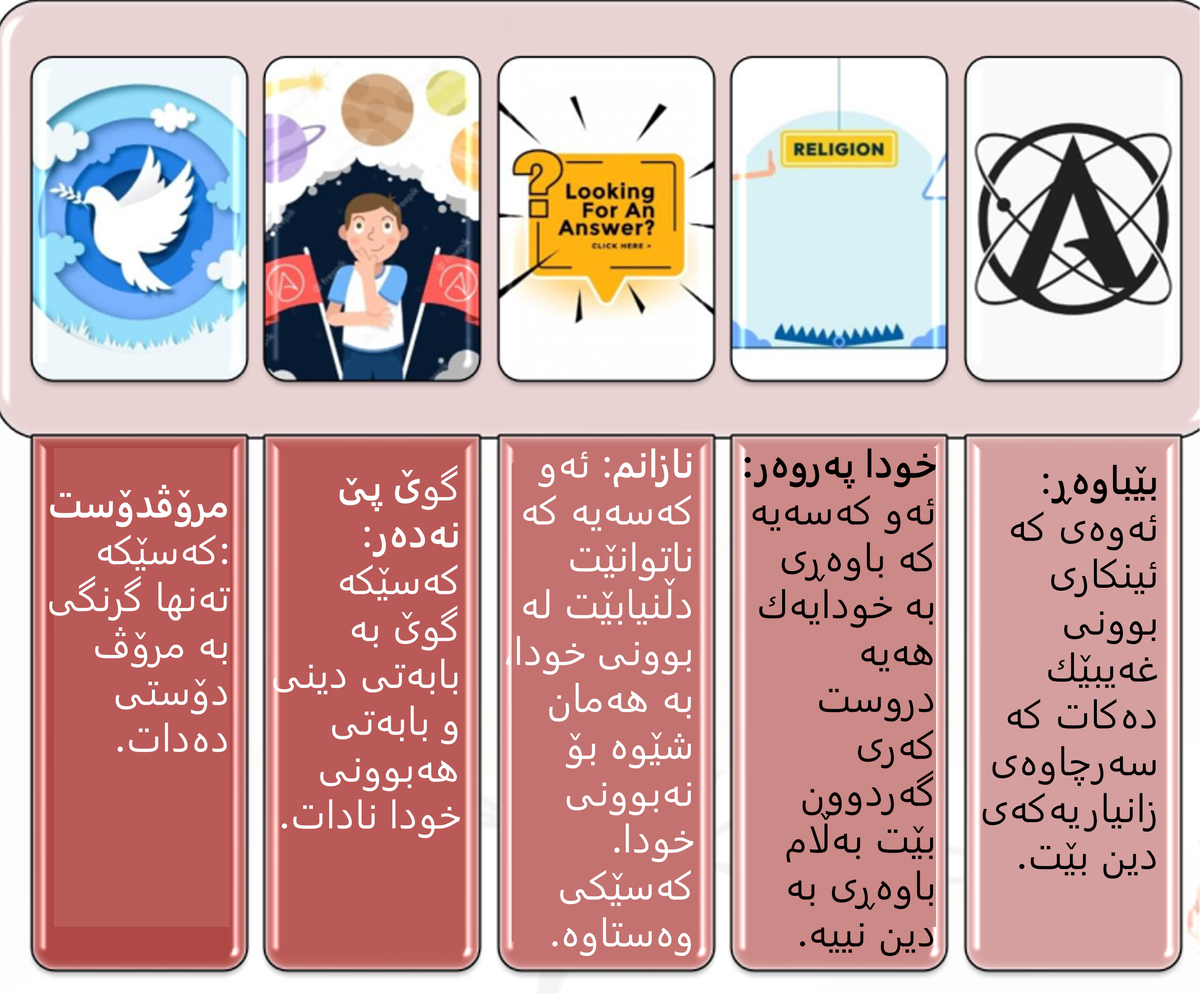
<style>
.page{position:relative;width:1200px;height:994px}
.page>*{position:absolute;margin:0}
.t1{font:39.1px "Inter-Regular";color:#ffffff}
.t2{font:39.1px "Inter-SemiBold";color:#ffffff}
.t3{font:39.1px "Inter-Regular";color:#000000}
.t4{font:39.1px "Inter-SemiBold";color:#000000}
</style>
<div class="page">
<p class="t1" style="left:505px;top:448px;width:189px;height:508px;text-align:right"><span class="t2">نازانم</span>: ئەو کەسەیە کە ناتوانێت دڵنیابێت لە بوونی خودا، بە هەمان شێوە بۆ نەبوونی خودا. کەسێکی وەستاوە.</p>
<p class="t3" style="left:745px;top:448px;width:191px;height:508px;text-align:right"><span class="t4">خودا پەروەر: </span>ئەو کەسەیە کە باوەڕی بە خودایەك هەیە دروست کەری گەردوون بێت بەڵام باوەڕی بە دین نییە.</p>
<p class="t1" style="left:273px;top:464px;width:188px;height:375px;text-align:right">گو<span class="t2">ێ پێ نەدەر</span>: کەسێکە گوێ بە بابەتی دینی و بابەتی هەبوونی خودا نادات.</p>
<p class="t3" style="left:982px;top:464px;width:175px;height:415px;text-align:right"><span class="t4">بێباوەڕ</span>: ئەوەی کە ئینکاری بوونی غەیبێك دەکات کە سەرچاوەی زانیاریەکەی دین بێت.</p>
<p class="t1" style="left:48px;top:485px;width:182px;height:267px;text-align:right"><span class="t2">مرۆڤدۆست</span>:کەسێکە تەنها گرنگی بە مرۆڤ دۆستی دەدات.</p>
</div>
